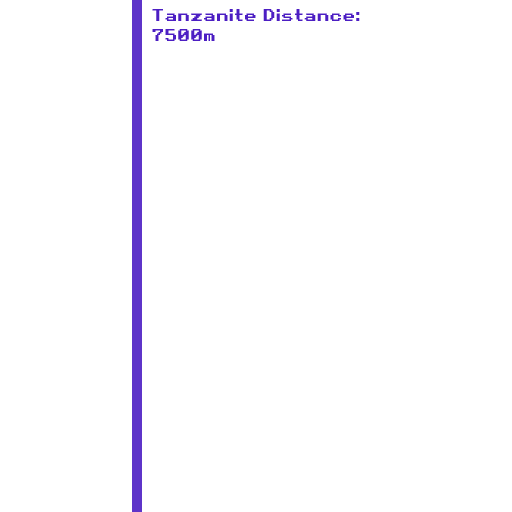
<style>
.page{position:relative;width:512px;height:512px;background:#ffffff}
.page>*{position:absolute;margin:0}
.t1{font:16.7px "RetroGaming";color:#4c1ec3}
</style>
<div class="page">
<p class="t1" style="left:152px;top:9px;width:208px;height:32px">Tanzanite Distance:<br>7500m</p>
</div>
